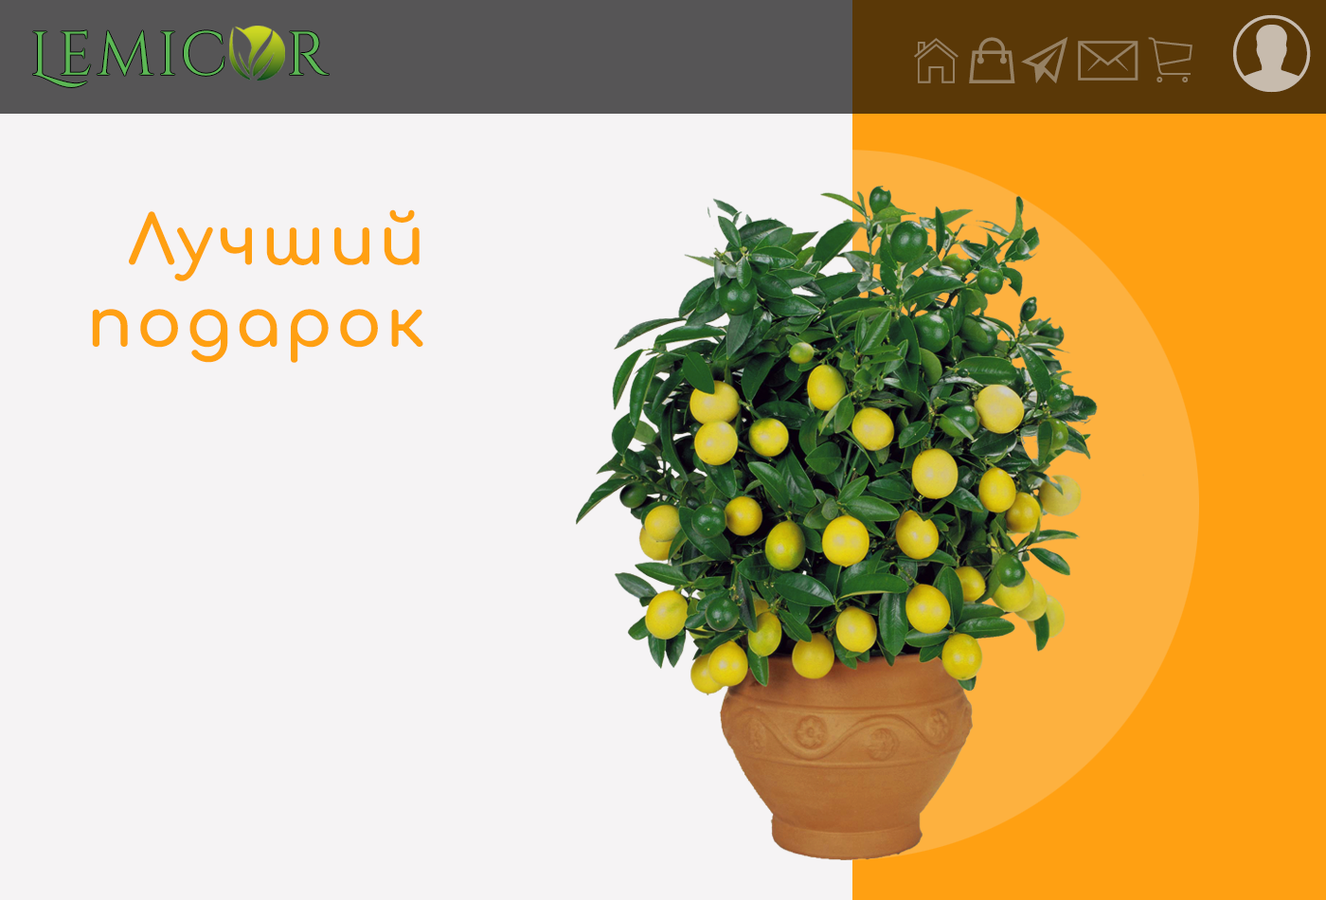
<style>
.page{position:relative;width:1326px;height:900px;background:#f5f3f4}
.page>*{position:absolute;margin:0}
.t1{font:61.4px "CinzelDecorative-Regular";letter-spacing:0.05em;color:#5cb755}
.t2{font:68.2px "Comfortaa-Bold";letter-spacing:0.05em;color:#ffa012}
.t3{font:68.2px/13.3px "Comfortaa-Bold";letter-spacing:0.05em;color:#ffa012}
</style>
<div class="page">
<p class="t1" style="left:33px;top:30px;width:296px;height:57px">Lemic   r</p>
<p class="t2" style="left:92px;top:209px;width:331px;height:154px;text-align:right"><span class="t3">Лучший<br></span>подарок</p>
</div>
